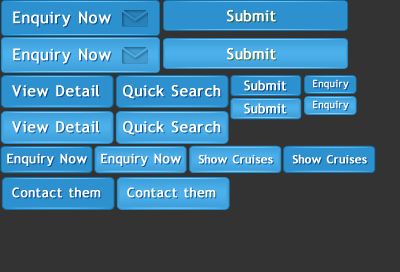
<style>
.page{position:relative;width:400px;height:272px;background:#333333}
.page>*{position:absolute;margin:0}
.t1{font:16px "TrebuchetMS";letter-spacing:0.1em;color:#ffffff;font-weight:bold}
.t2{font:15px "TrebuchetMS";letter-spacing:0.1em;color:#ffffff;font-weight:bold}
.t3{font:13px "TrebuchetMS";letter-spacing:0.1em;color:#ffffff;font-weight:bold}
.t4{font:10px "TrebuchetMS";letter-spacing:0.1em;color:#ffffff;font-weight:bold}
.t5{font:11.4px "TrebuchetMS";letter-spacing:0.1em;color:#ffffff;font-weight:bold}
.t6{font:13px "TrebuchetMS";letter-spacing:0.1em;color:#fefefe;font-weight:bold}
</style>
<div class="page">
<p class="t1" style="left:13px;top:11px;width:98px;height:16px">Enquiry Now</p>
<p class="t1" style="left:13px;top:48px;width:98px;height:16px">Enquiry Now</p>
<p class="t2" style="left:12px;top:85px;width:88px;height:12px">View Detail</p>
<p class="t2" style="left:123px;top:85px;width:98px;height:14px">Quick Search</p>
<p class="t3" style="left:244px;top:80px;width:43px;height:11px">Submit</p>
<p class="t4" style="left:313px;top:79px;width:36px;height:11px">Enquiry</p>
<p class="t4" style="left:313px;top:100px;width:36px;height:11px">Enquiry</p>
<p class="t3" style="left:244px;top:103px;width:43px;height:11px">Submit</p>
<p class="t2" style="left:12px;top:121px;width:88px;height:12px">View Detail</p>
<p class="t2" style="left:123px;top:121px;width:98px;height:14px">Quick Search</p>
<p class="t3" style="left:7px;top:153px;width:80px;height:13px">Enquiry Now</p>
<p class="t3" style="left:101px;top:153px;width:80px;height:13px">Enquiry Now</p>
<p class="t5" style="left:198px;top:154px;width:75px;height:10px">Show Cruises</p>
<p class="t5" style="left:292px;top:154px;width:75px;height:10px">Show Cruises</p>
<p class="t6" style="left:12px;top:187px;width:89px;height:11px">Contact them</p>
<p class="t6" style="left:127px;top:187px;width:89px;height:11px">Contact them</p>
</div>
